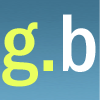
<style>
.page{position:relative;width:100px;height:100px}
.page>*{position:absolute;margin:0}
.t1{font:84.7px "FranklinGothic-MediumCond";color:#eaff5e}
.t2{font:84.7px "FranklinGothic-MediumCond";color:#ffffff}
</style>
<div class="page">
<p class="t1" style="left:2px;top:14px;width:94px;height:73px">g.<span class="t2">b</span></p>
</div>
